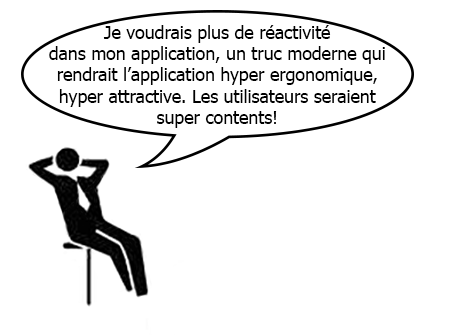
<style>
.page{position:relative;width:450px;height:335px;background:#ffffff}
.page>*{position:absolute;margin:0}
.t1{font:17.7px "Tahoma";color:#000000}
</style>
<div class="page">
<p class="t1" style="left:49px;top:25px;width:336px;height:103px;text-align:center">Je voudrais plus de réactivité <br>dans mon application, un truc moderne qui<br>rendrait l’application hyper ergonomique, <br>hyper attractive. Les utilisateurs seraient <br>super contents!</p>
</div>
